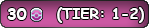
<style>
.page{position:relative;width:149px;height:28px}
.page>*{position:absolute;margin:0}
.t1{font:12px "ComicSansMS-Bold";color:#ffffff}
.t2{font:14.7px "ComicSansMS-Bold";color:#ffffff}
</style>
<div class="page">
<p class="t1" style="left:7px;top:8px;width:20px;height:12px">30</p>
<p class="t2" style="left:57px;top:7px;width:87px;height:16px">(TIER: 1-2)</p>
</div>
